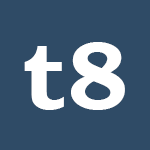
<style>
.page{position:relative;width:150px;height:150px;background:#2f4b66}
.page>*{position:absolute;margin:0}
.t1{font:96px "BookmanOldStyle-Bold";color:#ffffff}
</style>
<div class="page">
<p class="t1" style="left:24px;top:42px;width:101px;height:68px">t8</p>
</div>
